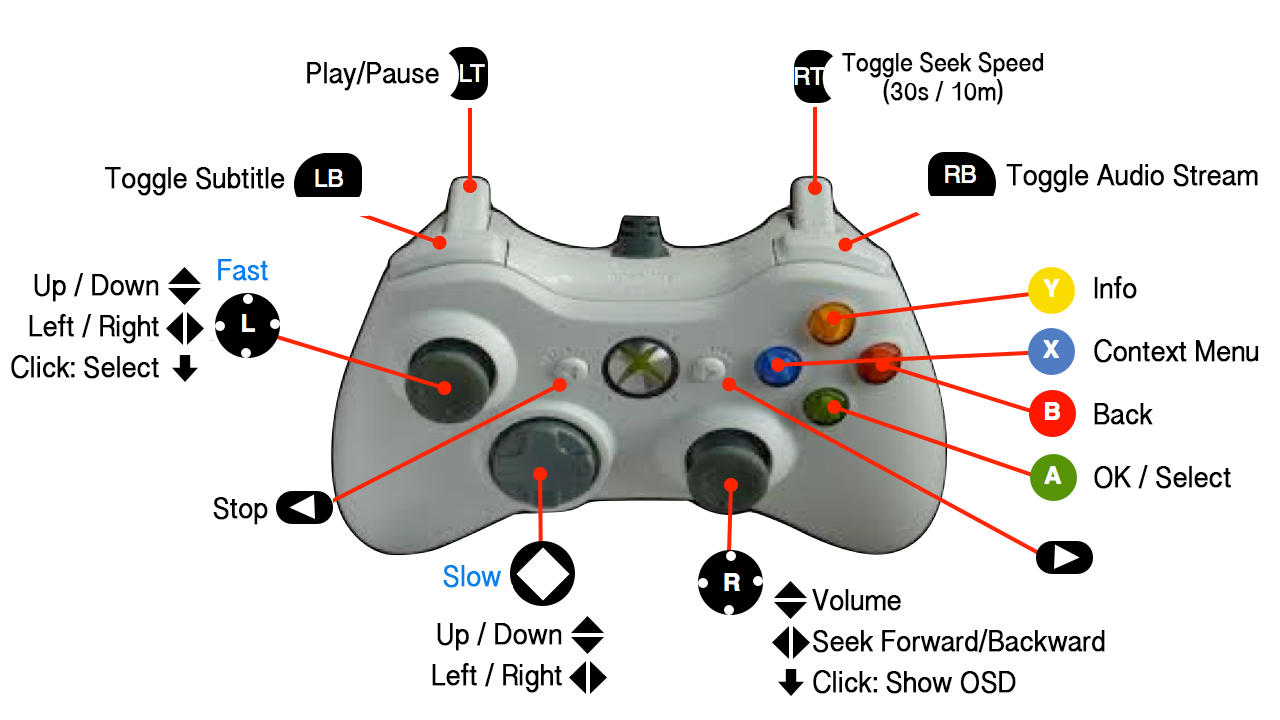
<style>
.page{position:relative;width:1280px;height:720px;background:#ffffff}
.page>*{position:absolute;margin:0}
.t1{font:24px "KannadaSangamMN";color:#000000;font-weight:bold;scale:0.92 1}
.t2{font:28px "KannadaSangamMN";color:#000000;font-weight:bold;scale:0.92 1}
.t3{font:28px "KannadaSangamMN";color:#0080ed;font-weight:bold;scale:0.92 1}
.t4{font:28px/41px "KannadaSangamMN";color:#000000;font-weight:bold;scale:0.92 1}
.t5{font:28px/63px "KannadaSangamMN";color:#000000;font-weight:bold;scale:0.92 1}
</style>
<div class="page">
<p class="t1" style="left:842px;top:52px;width:202px;height:53px;text-align:center">Toggle Seek Speed<br>(30s / 10m)</p>
<p class="t2" style="left:307px;top:61px;width:132px;height:30px">Play/Pause</p>
<p class="t2" style="left:105px;top:167px;width:180px;height:29px">Toggle Subtitle</p>
<p class="t2" style="left:1006px;top:164px;width:252px;height:29px">Toggle Audio Stream</p>
<p class="t3" style="left:218px;top:259px;width:50px;height:22px">Fast</p>
<p class="t4" style="left:11px;top:273px;width:148px;height:106px;text-align:right">Up / Down<br>Left / Right<br>Click: Select</p>
<p class="t5" style="left:1094px;top:276px;width:165px;height:213px">Info<br>Context Menu<br>Back<br>OK / Select</p>
<p class="t2" style="left:213px;top:497px;width:55px;height:28px">Stop</p>
<p class="t3" style="left:443px;top:565px;width:58px;height:23px">Slow</p>
<p class="t4" style="left:812px;top:589px;width:293px;height:105px">Volume<br>Seek Forward/Backward<br>Click: Show OSD</p>
<p class="t4" style="left:432px;top:622px;width:130px;height:71px;text-align:right">Up / Down<br>Left / Right</p>
</div>
